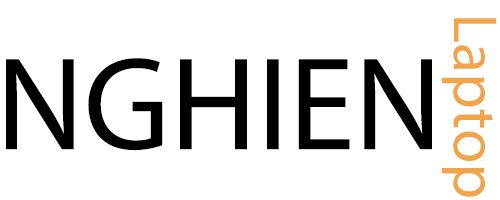
<style>
.page{position:relative;width:500px;height:200px;background:#ffffff}
.page>*{position:absolute;margin:0}
.t1{font:62.5px "MyriadPro-Regular";color:#f1a449}
.t2{font:133.3px "MyriadPro-Regular";color:#000000}
</style>
<div class="page">
<p class="t1" style="left:441px;top:18px;width:56px;height:179px;rotate:90deg">Laptop</p>
<p class="t2" style="left:6px;top:58px;width:426px;height:93px">NGHIEN</p>
</div>
